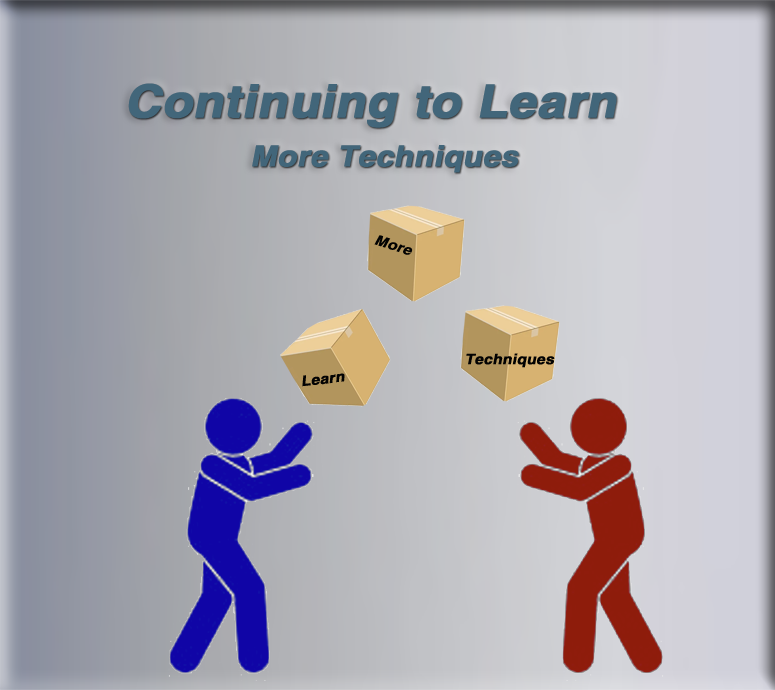
<style>
.page{position:relative;width:775px;height:690px}
.page>*{position:absolute;margin:0}
.t1{font:45.6px "HelveticaLTStd-Bold";color:#42667a;font-weight:bold;font-style:italic;scale:1.08 1}
.t2{font:28.8px "HelveticaLTStd-Bold";color:#42667a;font-weight:bold;font-style:italic;scale:1.08 1}
.t3{font:14.3px "HelveticaLTStd-Bold";color:#020202;font-weight:bold;font-style:italic;scale:1.08 1}
</style>
<div class="page">
<p class="t1" style="left:128px;top:83px;width:489px;height:45px">Continuing to Learn</p>
<p class="t2" style="left:252px;top:145px;width:267px;height:28px">More Techniques</p>
<p class="t3" style="left:374px;top:235px;width:39px;height:20px;rotate:18deg">More</p>
<p class="t3" style="left:466px;top:353px;width:89px;height:15px">Techniques</p>
<p class="t3" style="left:302px;top:373px;width:43px;height:14px;rotate:-6deg">Learn</p>
</div>
